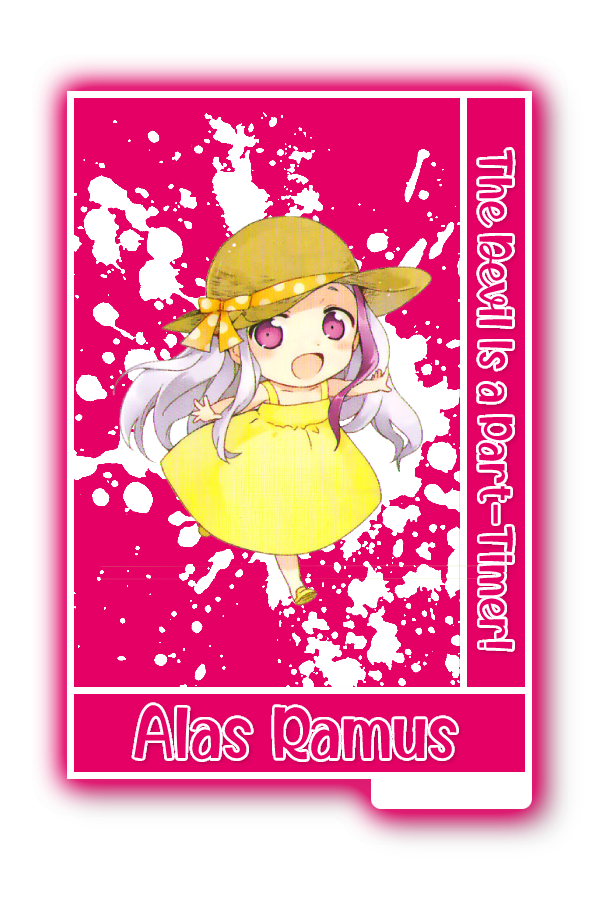
<style>
.page{position:relative;width:600px;height:900px;background:#ffffff}
.page>*{position:absolute;margin:0}
.t1{font:48.8px "ButterFood";color:#e50065}
.t2{font:75px "ButterFood";color:#e50065}
</style>
<div class="page">
<p class="t1" style="left:478px;top:149px;width:37px;height:500px;rotate:90deg">The Devil Is a Part-Timer!</p>
<p class="t2" style="left:134px;top:704px;width:323px;height:56px">Alas Ramus</p>
</div>
